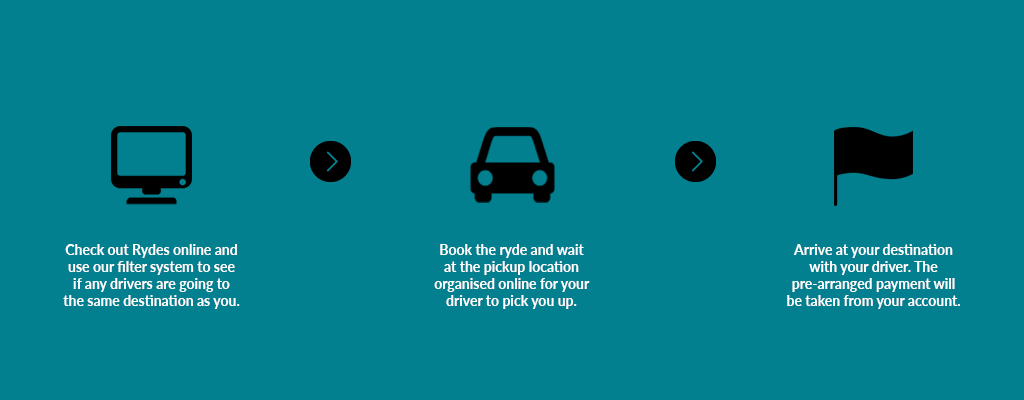
<style>
.page{position:relative;width:1024px;height:400px;background:#028090}
.page>*{position:absolute;margin:0}
.t1{font:14px "Lato-Bold";color:#ffffff}
</style>
<div class="page">
<p class="t1" style="left:63px;top:244px;width:177px;height:65px;text-align:center">Check out Rydes online and use our filter system to see if any drivers are going to the same destination as you.</p>
<p class="t1" style="left:434px;top:244px;width:156px;height:65px;text-align:center">Book the ryde and wait       at the pickup location            organised online for your driver to pick you up.</p>
<p class="t1" style="left:787px;top:244px;width:173px;height:65px;text-align:center">Arrive at your destination with your driver. The     pre-arranged payment will be taken from your account.</p>
</div>
